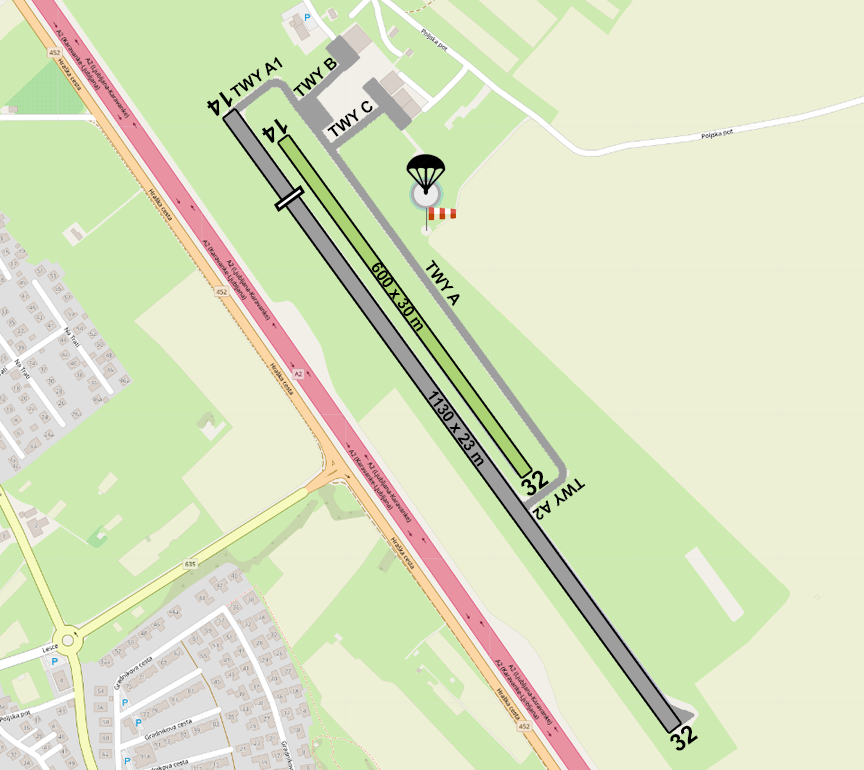
<style>
.page{position:relative;width:864px;height:770px;background:#eef0d5}
.page>*{position:absolute;margin:0}
.t1{font:16px "Arial-BoldMT";color:#000000}
.t2{font:24px "Arial-BoldMT";color:#000000}
</style>
<div class="page">
<p class="t1" style="left:229px;top:56px;width:54px;height:41px;rotate:-35deg">TWY A1</p>
<p class="t1" style="left:292px;top:57px;width:45px;height:40px;rotate:-42deg">TWY B</p>
<p class="t2" style="left:206px;top:91px;width:27px;height:26px;rotate:144deg">14</p>
<p class="t1" style="left:327px;top:101px;width:46px;height:36px;rotate:-37deg">TWY C</p>
<p class="t2" style="left:261px;top:118px;width:27px;height:26px;rotate:144deg">14</p>
<p class="t1" style="left:371px;top:262px;width:52px;height:70px;rotate:54deg">600 x 30 m</p>
<p class="t1" style="left:425px;top:259px;width:35px;height:48px;rotate:54deg">TWY A</p>
<p class="t1" style="left:428px;top:391px;width:56px;height:76px;rotate:54deg">1130 x 23 m</p>
<p class="t2" style="left:521px;top:470px;width:28px;height:26px;rotate:-36deg">32</p>
<p class="t1" style="left:532px;top:478px;width:54px;height:42px;rotate:143deg">TWY A2</p>
<p class="t2" style="left:670px;top:725px;width:28px;height:26px;rotate:-36deg">32</p>
</div>
